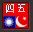
<style>
.page{position:relative;width:33px;height:32px;background:#333333}
.page>*{position:absolute;margin:0}
.t1{font:10.4px "SimSun";color:#ffffff}
</style>
<div class="page">
<p class="t1" style="left:6px;top:4px;width:19px;height:9px">四五</p>
</div>
